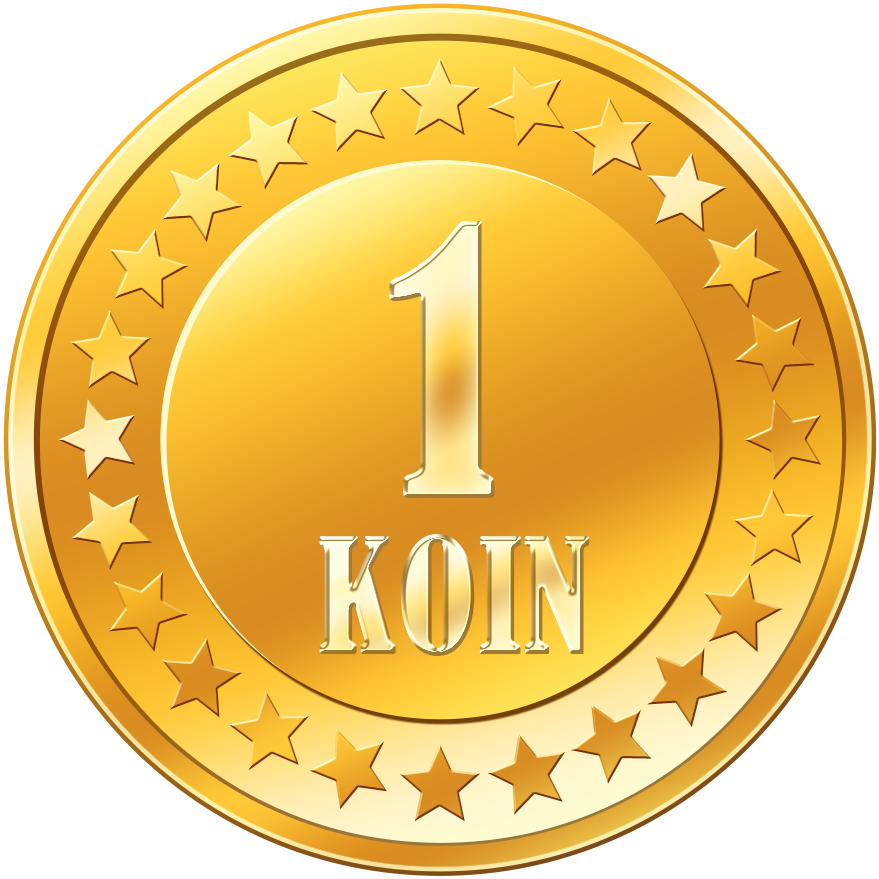
<style>
.page{position:relative;width:879px;height:879px;background:#ffffff}
.page>*{position:absolute;margin:0}
.t1{font:350px "BernardMT-Condensed"}
.t2{font:150px "BernardMT-Condensed"}
</style>
<div class="page">
<p class="t1" style="left:389px;top:221px;width:106px;height:277px">1</p>
<p class="t2" style="left:319px;top:534px;width:271px;height:122px">KOIN</p>
</div>
